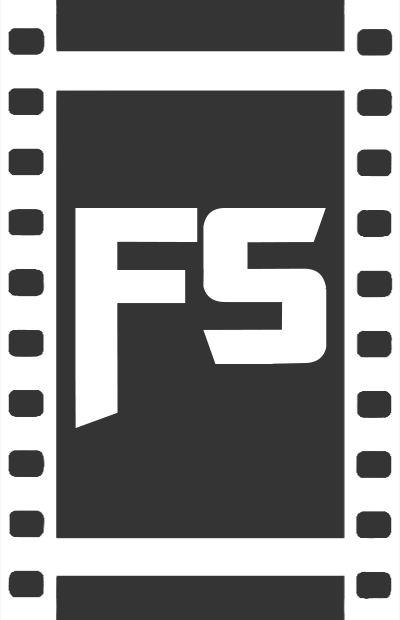
<style>
.page{position:relative;width:400px;height:620px;background:#343434}
.page>*{position:absolute;margin:0}
.t1{font:250px "Transformers";color:#ffffff}
</style>
<div class="page">
<p class="t1" style="left:75px;top:208px;width:252px;height:220px">fs</p>
</div>
